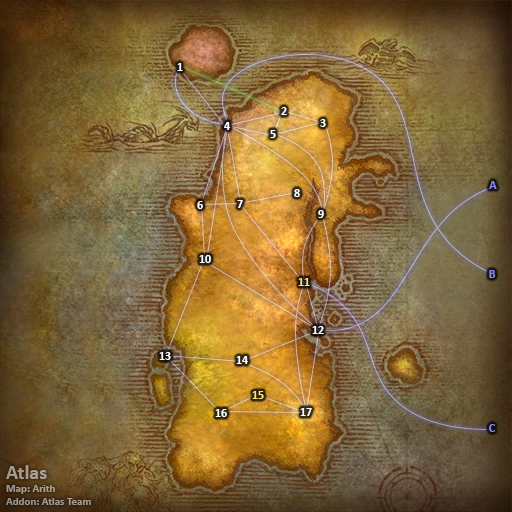
<style>
.page{position:relative;width:512px;height:512px}
.page>*{position:absolute;margin:0}
.t1{font:12px "Calibri-Bold";color:#ffffff}
.t2{font:12px "Calibri-Bold";color:#8788ee}
.t3{font:12px "Calibri-Bold";color:#fee570}
.t4{font:11px "Calibri-Bold";color:#a49b92}
.t5{font:20px "Calibri-Bold";color:#a49b92}
</style>
<div class="page">
<p class="t1" style="left:177px;top:63px;width:6px;height:8px">1</p>
<p class="t1" style="left:281px;top:107px;width:6px;height:8px">2</p>
<p class="t1" style="left:224px;top:122px;width:6px;height:8px">4</p>
<p class="t1" style="left:320px;top:119px;width:6px;height:8px">3</p>
<p class="t1" style="left:270px;top:130px;width:6px;height:8px">5</p>
<p class="t2" style="left:489px;top:181px;width:8px;height:8px">A</p>
<p class="t1" style="left:294px;top:189px;width:6px;height:8px">8</p>
<p class="t1" style="left:197px;top:201px;width:6px;height:8px">6</p>
<p class="t1" style="left:237px;top:200px;width:6px;height:8px">7</p>
<p class="t1" style="left:318px;top:210px;width:6px;height:8px">9</p>
<p class="t1" style="left:199px;top:255px;width:12px;height:8px">10</p>
<p class="t2" style="left:489px;top:270px;width:7px;height:8px">B</p>
<p class="t3" style="left:298px;top:278px;width:12px;height:8px">11</p>
<p class="t1" style="left:312px;top:326px;width:12px;height:8px">12</p>
<p class="t1" style="left:159px;top:352px;width:12px;height:8px">13</p>
<p class="t1" style="left:236px;top:356px;width:12px;height:8px">14</p>
<p class="t3" style="left:252px;top:391px;width:12px;height:8px">15</p>
<p class="t1" style="left:215px;top:409px;width:12px;height:8px">16</p>
<p class="t1" style="left:300px;top:408px;width:12px;height:8px">17</p>
<p class="t2" style="left:489px;top:424px;width:6px;height:8px">C</p>
<p class="t4" style="left:6px;top:465px;width:85px;height:40px"><span class="t5">Atlas<br></span>Map: Arith<br>Addon: Atlas Team</p>
</div>
